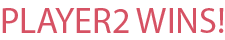
<style>
.page{position:relative;width:225px;height:40px;background:#ffffff}
.page>*{position:absolute;margin:0}
.t1{font:36px "MyriadPro-Regular";color:#d65264}
</style>
<div class="page">
<p class="t1" style="left:2px;top:8px;width:222px;height:25px">PLAYER2 WINS!</p>
</div>
